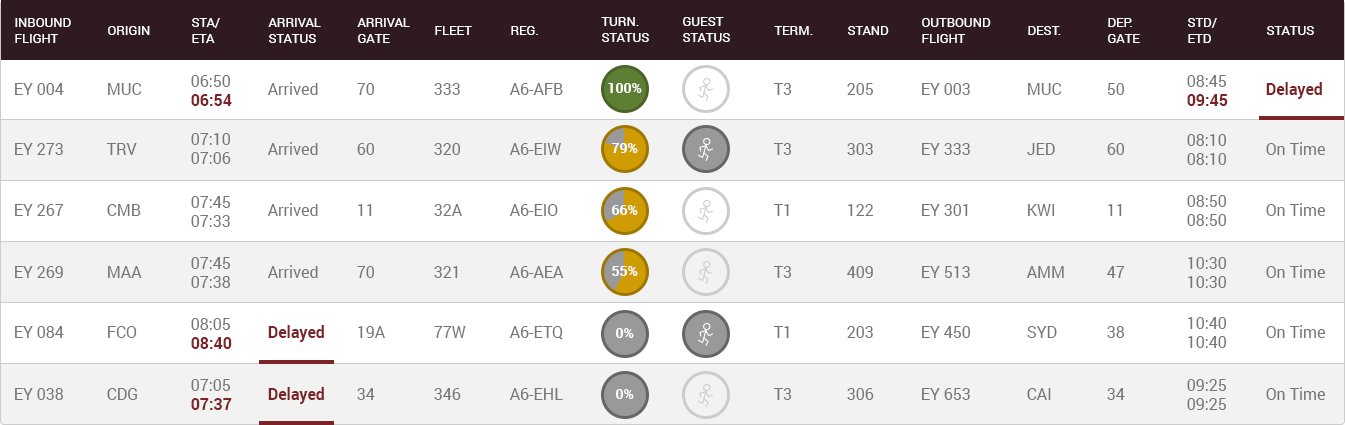
<style>
.page{position:relative;width:1345px;height:425px;background:#f2f2f2}
.page>*{position:absolute;margin:0}
.t1{font:13px "Roboto-Regular";color:#ffffff;text-transform:uppercase}
.t2{font:16px "Roboto-Regular";color:#767676}
.t3{font:16px "Roboto-Bold";color:#7b2326}
.t4{font:14px "Roboto-Bold";color:#fefefe}
</style>
<div class="page">
<p class="t1" style="left:601px;top:17px;width:48px;height:25px">Turn.<br>Status</p>
<p class="t1" style="left:683px;top:17px;width:47px;height:25px">Guest<br>Status</p>
<p class="t1" style="left:15px;top:18px;width:56px;height:25px">Inbound<br>Flight</p>
<p class="t1" style="left:108px;top:26px;width:42px;height:9px">Origin</p>
<p class="t1" style="left:192px;top:18px;width:28px;height:25px">STA/<br>ETA</p>
<p class="t1" style="left:268px;top:18px;width:53px;height:25px">Arrival<br>Status</p>
<p class="t1" style="left:357px;top:18px;width:53px;height:25px">Arrival<br>Gate</p>
<p class="t1" style="left:435px;top:26px;width:37px;height:9px">Fleet</p>
<p class="t1" style="left:511px;top:26px;width:27px;height:9px">REG.</p>
<p class="t1" style="left:774px;top:26px;width:39px;height:9px">Term.</p>
<p class="t1" style="left:848px;top:26px;width:41px;height:9px">Stand</p>
<p class="t1" style="left:922px;top:18px;width:69px;height:25px">Outbound<br>Flight</p>
<p class="t1" style="left:1028px;top:26px;width:33px;height:9px">Dest.</p>
<p class="t1" style="left:1108px;top:18px;width:32px;height:25px">Dep.<br>Gate</p>
<p class="t1" style="left:1188px;top:18px;width:29px;height:25px">STD/<br>etd</p>
<p class="t1" style="left:1267px;top:26px;width:47px;height:9px">Status</p>
<p class="t2" style="left:191px;top:75px;width:41px;height:31px">06:50<br><span class="t3">06:54</span></p>
<p class="t2" style="left:1187px;top:75px;width:41px;height:31px">08:45<br><span class="t3">09:45</span></p>
<p class="t2" style="left:15px;top:83px;width:49px;height:12px">EY 004</p>
<p class="t2" style="left:108px;top:83px;width:33px;height:12px">MUC</p>
<p class="t2" style="left:267px;top:82px;width:51px;height:13px">Arrived</p>
<p class="t2" style="left:357px;top:83px;width:17px;height:12px">70</p>
<p class="t2" style="left:434px;top:83px;width:26px;height:12px">333</p>
<p class="t2" style="left:509px;top:83px;width:54px;height:12px">A6-AFB</p>
<p class="t4" style="left:608px;top:83px;width:34px;height:10px">100%</p>
<p class="t2" style="left:773px;top:83px;width:19px;height:12px">T3</p>
<p class="t2" style="left:847px;top:83px;width:26px;height:12px">205</p>
<p class="t2" style="left:922px;top:83px;width:48px;height:12px">EY 003</p>
<p class="t2" style="left:1028px;top:83px;width:33px;height:12px">MUC</p>
<p class="t2" style="left:1107px;top:83px;width:17px;height:12px">50</p>
<p class="t3" style="left:1266px;top:82px;width:56px;height:17px">Delayed</p>
<p class="t2" style="left:191px;top:133px;width:40px;height:31px">07:10<br>07:06</p>
<p class="t2" style="left:1187px;top:134px;width:39px;height:31px">08:10<br>08:10</p>
<p class="t2" style="left:15px;top:143px;width:48px;height:12px">EY 273</p>
<p class="t2" style="left:106px;top:143px;width:31px;height:12px">TRV</p>
<p class="t2" style="left:267px;top:142px;width:51px;height:13px">Arrived</p>
<p class="t2" style="left:357px;top:143px;width:17px;height:12px">60</p>
<p class="t2" style="left:434px;top:143px;width:26px;height:12px">320</p>
<p class="t2" style="left:509px;top:143px;width:52px;height:12px">A6-EIW</p>
<p class="t4" style="left:611px;top:143px;width:27px;height:10px">79%</p>
<p class="t2" style="left:773px;top:143px;width:19px;height:12px">T3</p>
<p class="t2" style="left:847px;top:143px;width:26px;height:12px">303</p>
<p class="t2" style="left:922px;top:143px;width:48px;height:12px">EY 333</p>
<p class="t2" style="left:1027px;top:143px;width:28px;height:12px">JED</p>
<p class="t2" style="left:1107px;top:143px;width:17px;height:12px">60</p>
<p class="t2" style="left:1266px;top:142px;width:59px;height:13px">On Time</p>
<p class="t2" style="left:191px;top:196px;width:39px;height:31px">07:45<br>07:33</p>
<p class="t2" style="left:1187px;top:195px;width:39px;height:31px">08:50<br>08:50</p>
<p class="t2" style="left:15px;top:204px;width:49px;height:12px">EY 267</p>
<p class="t2" style="left:107px;top:204px;width:34px;height:12px">CMB</p>
<p class="t2" style="left:267px;top:203px;width:51px;height:13px">Arrived</p>
<p class="t2" style="left:358px;top:204px;width:14px;height:12px">11</p>
<p class="t2" style="left:434px;top:204px;width:28px;height:12px">32A</p>
<p class="t2" style="left:509px;top:204px;width:49px;height:12px">A6-EIO</p>
<p class="t4" style="left:612px;top:205px;width:26px;height:10px">66%</p>
<p class="t2" style="left:773px;top:204px;width:16px;height:12px">T1</p>
<p class="t2" style="left:848px;top:204px;width:26px;height:12px">122</p>
<p class="t2" style="left:922px;top:204px;width:46px;height:12px">EY 301</p>
<p class="t2" style="left:1028px;top:204px;width:27px;height:12px">KWI</p>
<p class="t2" style="left:1108px;top:204px;width:14px;height:12px">11</p>
<p class="t2" style="left:1266px;top:203px;width:59px;height:13px">On Time</p>
<p class="t2" style="left:191px;top:257px;width:40px;height:31px">07:45<br>07:38</p>
<p class="t2" style="left:1188px;top:257px;width:38px;height:31px">10:30<br>10:30</p>
<p class="t2" style="left:15px;top:266px;width:48px;height:12px">EY 269</p>
<p class="t2" style="left:108px;top:266px;width:34px;height:12px">MAA</p>
<p class="t2" style="left:267px;top:265px;width:51px;height:13px">Arrived</p>
<p class="t2" style="left:357px;top:266px;width:17px;height:12px">70</p>
<p class="t2" style="left:434px;top:266px;width:24px;height:12px">321</p>
<p class="t2" style="left:509px;top:266px;width:55px;height:12px">A6-AEA</p>
<p class="t4" style="left:612px;top:266px;width:26px;height:10px">55%</p>
<p class="t2" style="left:773px;top:266px;width:19px;height:12px">T3</p>
<p class="t2" style="left:847px;top:266px;width:26px;height:12px">409</p>
<p class="t2" style="left:922px;top:266px;width:48px;height:12px">EY 513</p>
<p class="t2" style="left:1026px;top:266px;width:38px;height:12px">AMM</p>
<p class="t2" style="left:1107px;top:266px;width:18px;height:12px">47</p>
<p class="t2" style="left:1266px;top:265px;width:59px;height:13px">On Time</p>
<p class="t2" style="left:191px;top:318px;width:41px;height:31px">08:05<br><span class="t3">08:40</span></p>
<p class="t2" style="left:1188px;top:317px;width:38px;height:31px">10:40<br>10:40</p>
<p class="t2" style="left:15px;top:326px;width:49px;height:12px">EY 084</p>
<p class="t2" style="left:108px;top:326px;width:29px;height:12px">FCO</p>
<p class="t3" style="left:268px;top:325px;width:56px;height:17px">Delayed</p>
<p class="t2" style="left:358px;top:326px;width:27px;height:12px">19A</p>
<p class="t2" style="left:434px;top:326px;width:32px;height:12px">77W</p>
<p class="t2" style="left:509px;top:326px;width:54px;height:14px">A6-ETQ</p>
<p class="t4" style="left:616px;top:328px;width:18px;height:10px">0%</p>
<p class="t2" style="left:773px;top:326px;width:16px;height:12px">T1</p>
<p class="t2" style="left:847px;top:326px;width:26px;height:12px">203</p>
<p class="t2" style="left:922px;top:326px;width:48px;height:12px">EY 450</p>
<p class="t2" style="left:1027px;top:326px;width:30px;height:12px">SYD</p>
<p class="t2" style="left:1107px;top:326px;width:18px;height:12px">38</p>
<p class="t2" style="left:1266px;top:325px;width:59px;height:13px">On Time</p>
<p class="t2" style="left:15px;top:388px;width:49px;height:12px">EY 038</p>
<p class="t2" style="left:107px;top:388px;width:30px;height:12px">CDG</p>
<p class="t2" style="left:191px;top:379px;width:41px;height:31px">07:05<br><span class="t3">07:37</span></p>
<p class="t3" style="left:268px;top:387px;width:56px;height:17px">Delayed</p>
<p class="t2" style="left:357px;top:388px;width:18px;height:12px">34</p>
<p class="t2" style="left:434px;top:388px;width:27px;height:12px">346</p>
<p class="t2" style="left:509px;top:388px;width:54px;height:12px">A6-EHL</p>
<p class="t4" style="left:616px;top:389px;width:18px;height:10px">0%</p>
<p class="t2" style="left:773px;top:388px;width:19px;height:12px">T3</p>
<p class="t2" style="left:847px;top:388px;width:27px;height:12px">306</p>
<p class="t2" style="left:922px;top:388px;width:48px;height:12px">EY 653</p>
<p class="t2" style="left:1027px;top:388px;width:24px;height:12px">CAI</p>
<p class="t2" style="left:1107px;top:388px;width:18px;height:12px">34</p>
<p class="t2" style="left:1187px;top:379px;width:39px;height:31px">09:25<br>09:25</p>
<p class="t2" style="left:1266px;top:387px;width:59px;height:13px">On Time</p>
</div>
